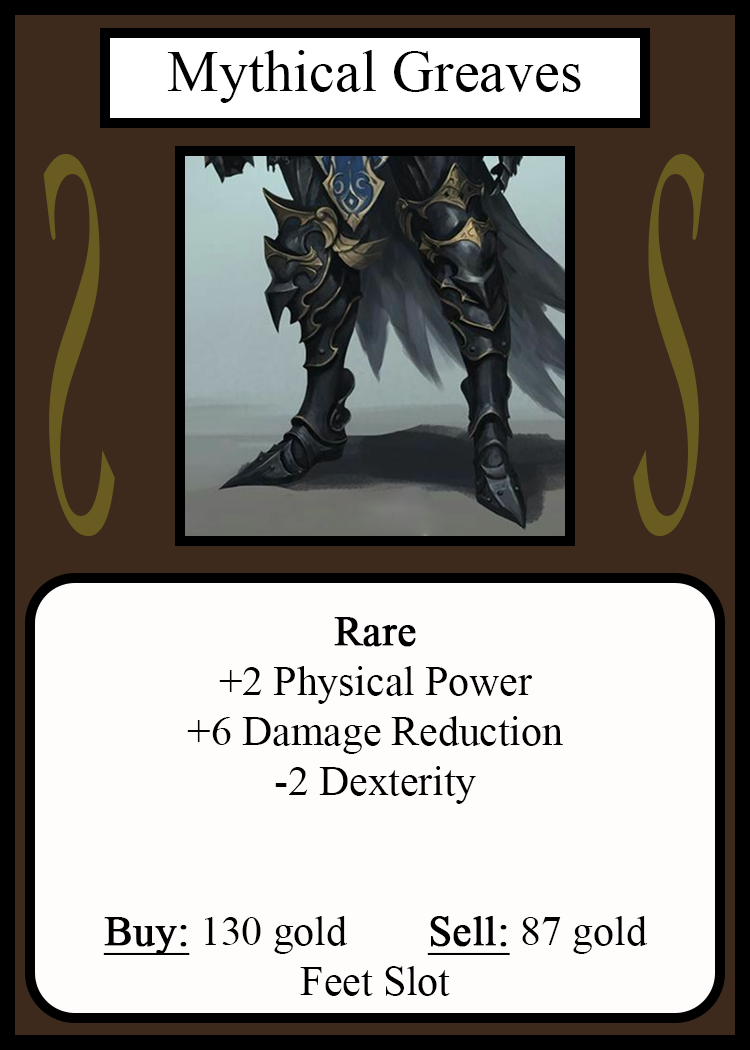
<style>
.page{position:relative;width:750px;height:1050px;background:#fffcfc}
.page>*{position:absolute;margin:0}
.t1{font:58.3px "TimesNewRomanPSMT";color:#010101}
.t2{font:548.5px "Apple-Chancery";color:#6a5c21;scale:0.27 1}
.t3{font:548.2px "Apple-Chancery";color:#6a5c21;scale:0.27 1}
.t4{font:41.7px "TimesNewRomanPSMT";color:#000000}
.t5{font:41.7px "TimesNewRomanPSMT";color:#000000;font-weight:bold}
.t6{font:41.7px "TimesNewRomanPSMT";color:#000000;font-weight:bold;text-decoration:underline}
</style>
<div class="page">
<p class="t1" style="left:167px;top:50px;width:414px;height:53px">Mythical Greaves</p>
<p class="t2" style="left:43px;top:154px;width:72px;height:382px;rotate:180deg">S</p>
<p class="t3" style="left:633px;top:154px;width:72px;height:382px">S</p>
<p class="t4" style="left:103px;top:617px;width:545px;height:379px;text-align:center"><span class="t5">Rare</span><br>+2 Physical Power<br>+6 Damage Reduction<br>-2 Dexterity<br><br><br><span class="t6">Buy:</span> 130 gold   <span class="t6">Sell:</span> 87 gold<br>Feet Slot</p>
</div>
